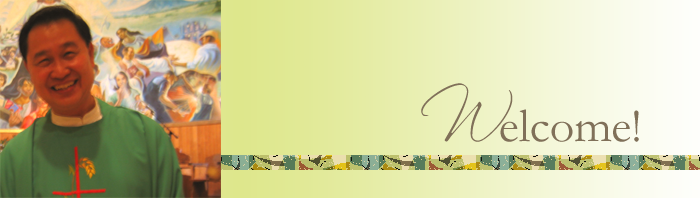
<style>
.page{position:relative;width:700px;height:198px}
.page>*{position:absolute;margin:0}
.t1{font:48px "Garamond";color:#807059}
.t2{font:72px "Scriptina";color:#807059}
</style>
<div class="page">
<p class="t1" style="left:421px;top:83px;width:218px;height:59px"><span class="t2">W</span>elcome!</p>
</div>
